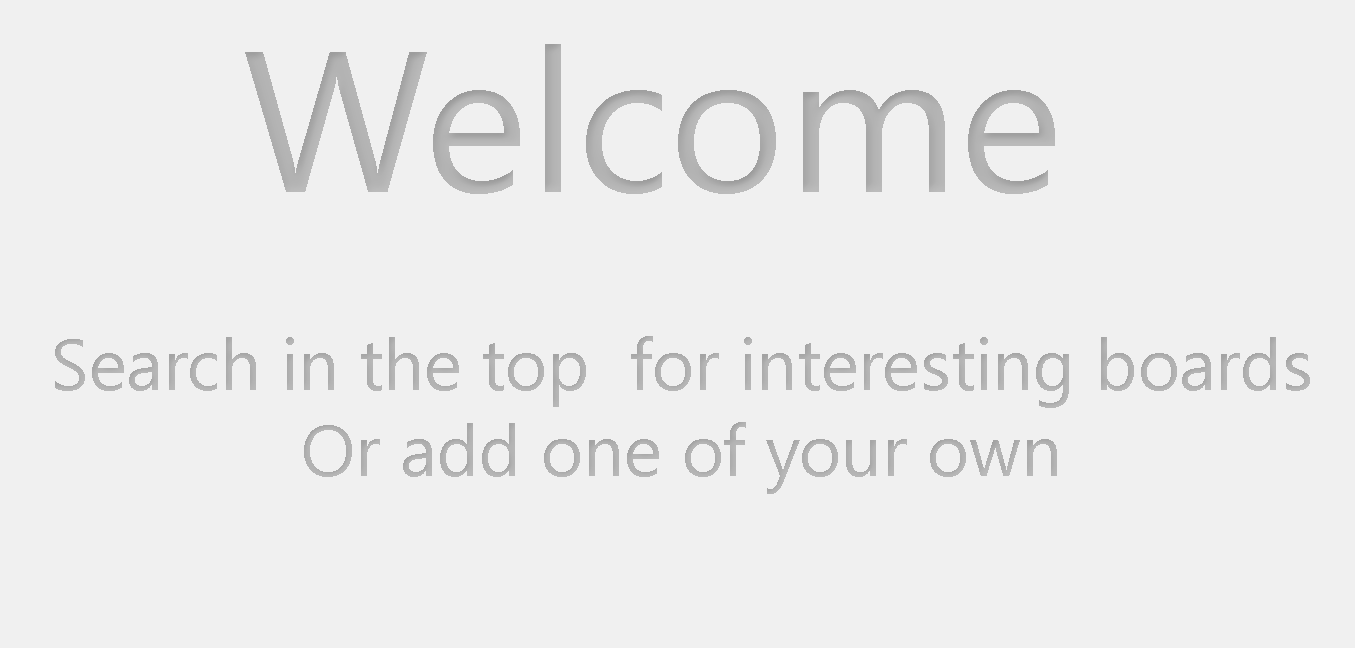
<style>
.page{position:relative;width:1355px;height:648px;background:#f0f0f0}
.page>*{position:absolute;margin:0}
.t1{font:200px "SegoeUI";color:#b2b2b2}
.t2{font:72px "SegoeUI";color:#b2b2b2}
</style>
<div class="page">
<p class="t1" style="left:245px;top:44px;width:810px;height:150px">Welcome</p>
<p class="t2" style="left:55px;top:336px;width:1255px;height:158px;text-align:center">Search in the top  for interesting boards<br>Or add one of your own</p>
</div>
